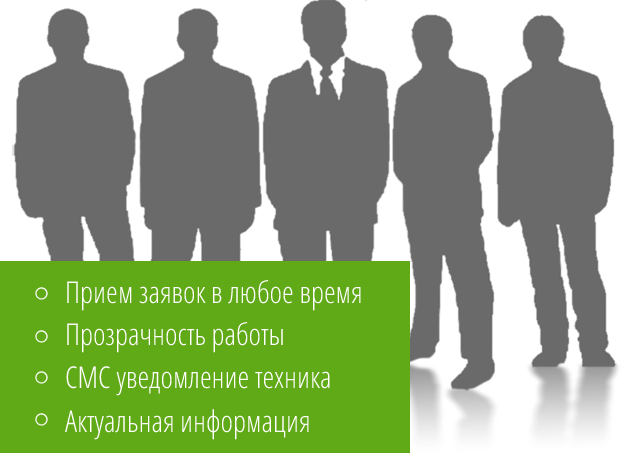
<style>
.page{position:relative;width:640px;height:453px;background:#6a6a6a}
.page>*{position:absolute;margin:0}
.t1{font:30px "OpenSans-CondensedLight";color:#fefefe}
.t2{font:30px "OpenSans-CondensedLight";color:#ffffff}
</style>
<div class="page">
<p class="t1" style="left:67px;top:280px;width:294px;height:31px">Прием заявок в любое время</p>
<p class="t2" style="left:67px;top:322px;width:216px;height:31px">Прозрачность работы</p>
<p class="t2" style="left:66px;top:366px;width:264px;height:30px">СМС уведомление техника</p>
<p class="t2" style="left:65px;top:409px;width:244px;height:31px">Актуальная информация</p>
</div>
